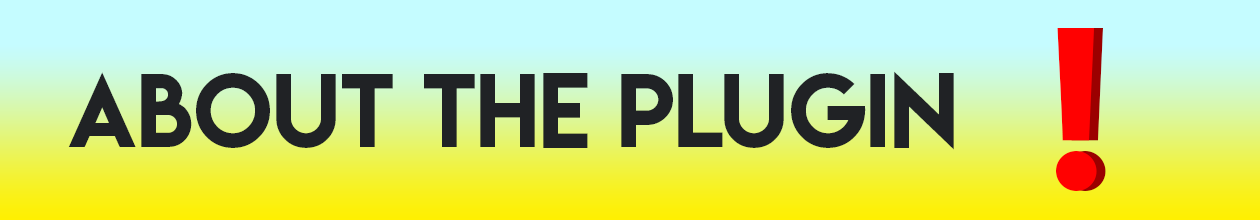
<style>
.page{position:relative;width:1260px;height:220px;background:#c5fcff}
.page>*{position:absolute;margin:0}
.t1{font:200.2px "LemonMilk";color:#ff0101}
.t2{font:93px "LemonMilk";color:#202225}
</style>
<div class="page">
<p class="t1" style="left:1056px;top:28px;width:41px;height:163px">!</p>
<p class="t1" style="left:1065px;top:28px;width:41px;height:163px">!</p>
<p class="t2" style="left:68px;top:71px;width:886px;height:79px">ABOUT THE PLUGIN</p>
</div>
